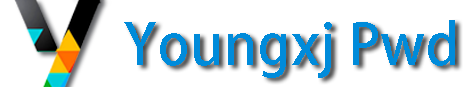
<style>
.page{position:relative;width:468px;height:87px;background:#ffffff}
.page>*{position:absolute;margin:0}
.t1{font:56px "AdobeHeitiStd-Regular";color:#008bda}
</style>
<div class="page">
<p class="t1" style="left:124px;top:20px;width:331px;height:58px">Youngxj Pwd</p>
</div>
